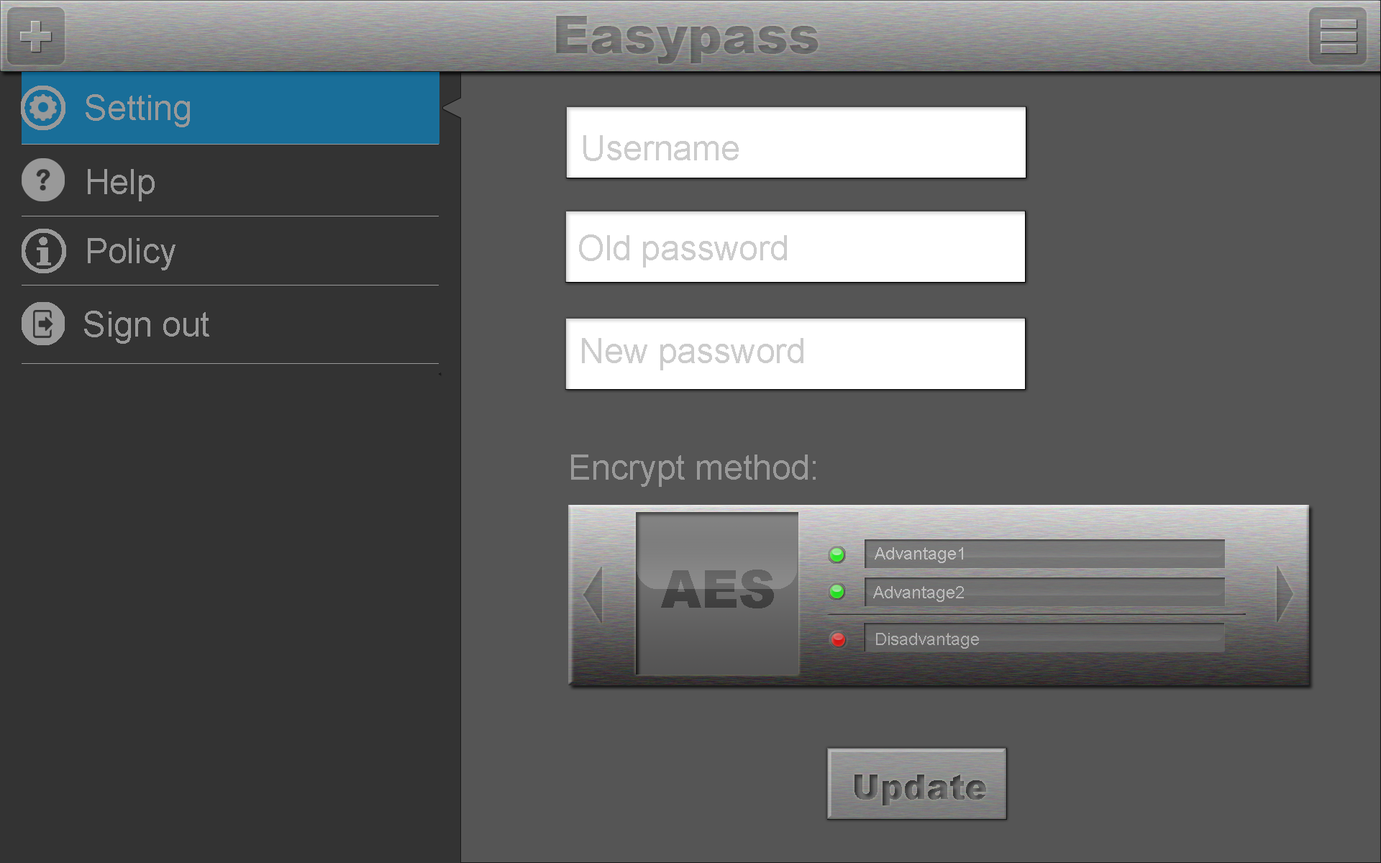
<style>
.page{position:relative;width:1381px;height:863px;background:#555555}
.page>*{position:absolute;margin:0}
.t1{font:34.5px "ArialMT";color:#999999}
.t2{font:34.5px "ArialMT";color:#cccccc}
.t3{font:17.3px "ArialMT";color:#cccccc}
.t4{font:51.8px "Arial-Black"}
.t5{font:17.3px "ArialMT";color:#afaeae}
</style>
<div class="page">
<p class="t1" style="left:86px;top:94px;width:104px;height:33px">Setting</p>
<p class="t2" style="left:583px;top:135px;width:156px;height:26px">Username</p>
<p class="t1" style="left:88px;top:169px;width:67px;height:32px">Help</p>
<p class="t1" style="left:88px;top:238px;width:88px;height:32px">Policy</p>
<p class="t2" style="left:579px;top:235px;width:208px;height:33px">Old password</p>
<p class="t1" style="left:84px;top:311px;width:125px;height:33px">Sign out</p>
<p class="t2" style="left:582px;top:338px;width:222px;height:32px">New password</p>
<p class="t1" style="left:571px;top:455px;width:245px;height:32px">Encrypt method:</p>
<p class="t3" style="left:875px;top:547px;width:88px;height:16px">Advantage1</p>
<p class="t4" style="left:661px;top:570px;width:113px;height:39px">AES</p>
<p class="t3" style="left:873px;top:586px;width:91px;height:16px">Advantage2</p>
<p class="t5" style="left:876px;top:633px;width:103px;height:16px">Disadvantage</p>
</div>
